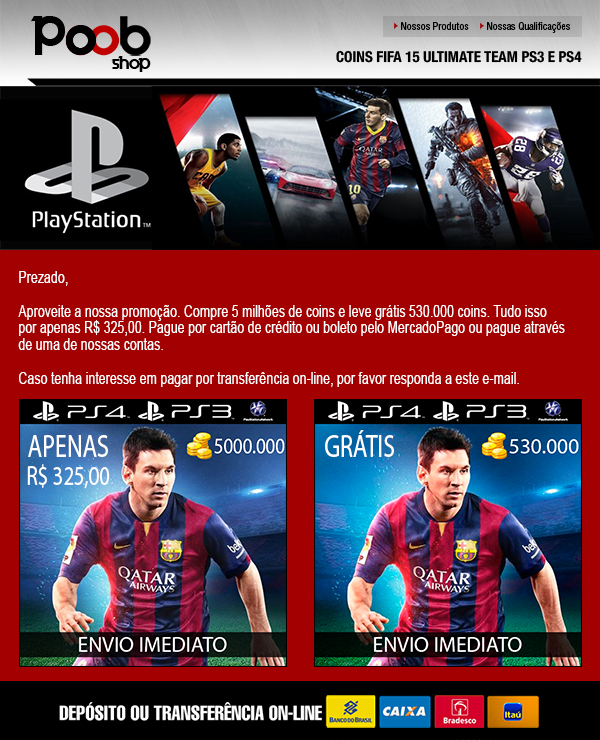
<style>
.page{position:relative;width:600px;height:740px;background:#a30001}
.page>*{position:absolute;margin:0}
.t1{font:43px "Velocity";color:#010101}
.t2{font:41px "Velocity";color:#010101}
.t3{font:43px "Velocity";color:#000000}
.t4{font:10px "HelveticaLTStd-Cond";color:#000000}
.t5{font:15px "HelveticaNeue-CondensedBold";color:#000000}
.t6{font:14.9px "Velocity";color:#000000}
.t7{font:16.8px "ArialMT";color:#ffffff;scale:0.74 1}
.t8{font:27.9px "MyriadPro-Regular";color:#ffffff;scale:0.74 1}
.t9{font:32.1px "MyriadPro-Regular";color:#ffffff;scale:0.74 1}
.t10{font:20px "HelveticaLTStd-Comp";color:#ffffff}
</style>
<div class="page">
<p class="t1" style="left:31px;top:16px;width:35px;height:39px">P</p>
<p class="t2" style="left:66px;top:26px;width:29px;height:29px">O</p>
<p class="t3" style="left:66px;top:25px;width:31px;height:30px">O</p>
<p class="t4" style="left:401px;top:22px;width:68px;height:8px">Nossos Produtos</p>
<p class="t4" style="left:487px;top:22px;width:83px;height:11px">Nossas Qualificações</p>
<p class="t5" style="left:336px;top:50px;width:246px;height:13px">COINS FIFA 15 ULTIMATE TEAM PS3 E PS4</p>
<p class="t6" style="left:111px;top:56px;width:40px;height:16px">shop</p>
<p class="t7" style="left:18px;top:271px;width:547px;height:116px">Prezado,<br><br>Aproveite a nossa promoção. Compre 5 milhões de coins e leve grátis 530.000 coins. Tudo isso<br>por apenas R$ 325,00. Pague por cartão de crédito ou boleto pelo MercadoPago ou pague através<br>de uma de nossas contas.<br><br>Caso tenha interesse em pagar por transferência on-line, por favor responda a este e-mail.</p>
<p class="t8" style="left:27px;top:435px;width:83px;height:54px;text-align:center"><span class="t9">APENAS<br></span>R$ 325,00</p>
<p class="t9" style="left:325px;top:430px;width:69px;height:27px">GRÁTIS</p>
<p class="t10" style="left:59px;top:702px;width:263px;height:19px">DEPÓSITO OU TRANSFERÊNCIA ON-LINE</p>
</div>
